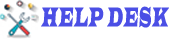
<style>
.page{position:relative;width:169px;height:39px;background:#ffffff}
.page>*{position:absolute;margin:0}
.t1{font:28.2px "LatinWide";letter-spacing:0.07em;color:#4b4fe5;font-style:italic;scale:0.37 1}
</style>
<div class="page">
<p class="t1" style="left:41px;top:6px;width:128px;height:22px">HELP DESK</p>
</div>
